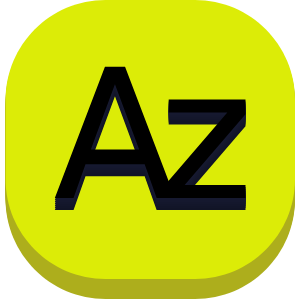
<style>
.page{position:relative;width:300px;height:300px;background:#dcec07}
.page>*{position:absolute;margin:0}
.t1{font:180px "DejaVuSans";color:#000000}
</style>
<div class="page">
<p class="t1" style="left:54px;top:66px;width:122px;height:132px">A</p>
<p class="t1" style="left:166px;top:99px;width:80px;height:99px">z</p>
</div>
